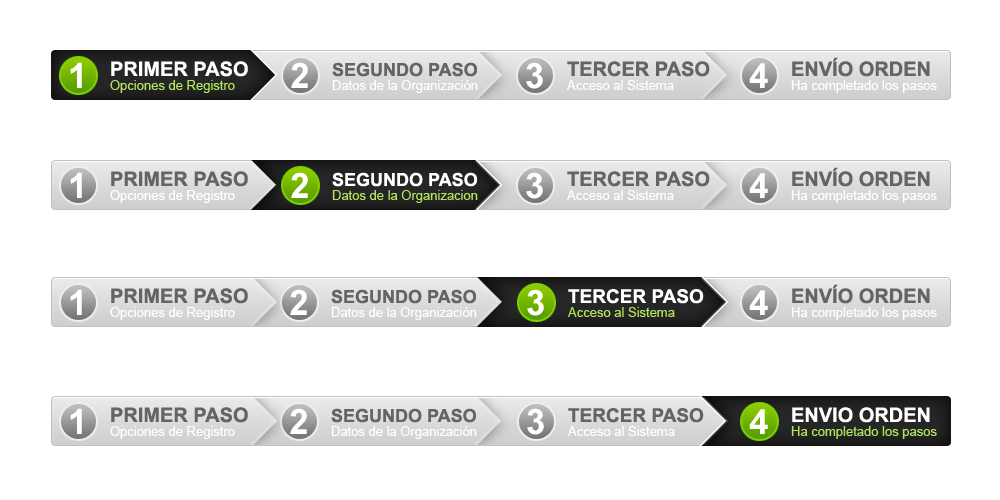
<style>
.page{position:relative;width:1000px;height:500px;background:#ffffff}
.page>*{position:absolute;margin:0}
.t1{font:35px "Arial-BoldMT";letter-spacing:-0.05em;color:#ffffff}
.t2{font:20px "Arial-BoldMT";color:#ffffff;text-transform:uppercase}
.t3{font:18px "Arial-BoldMT";color:#656464;text-transform:uppercase}
.t4{font:20px "Arial-BoldMT";color:#656464;text-transform:uppercase}
.t5{font:13px "ArialMT";color:#b1e35d}
.t6{font:13px "ArialMT";color:#ffffff}
.t7{font:18px "Arial-BoldMT";color:#ffffff;text-transform:uppercase}
.t8{font:19px "Arial-BoldMT";color:#ffffff;text-transform:uppercase}
.t9{font:19px "Arial-BoldMT";color:#656464;text-transform:uppercase}
</style>
<div class="page">
<p class="t1" style="left:70px;top:62px;width:12px;height:26px">1</p>
<p class="t2" style="left:111px;top:61px;width:137px;height:16px">PRIMER PASO</p>
<p class="t1" style="left:291px;top:62px;width:17px;height:26px">2</p>
<p class="t3" style="left:332px;top:62px;width:145px;height:15px">SEGUNDO PASO</p>
<p class="t1" style="left:526px;top:62px;width:17px;height:27px">3</p>
<p class="t4" style="left:567px;top:61px;width:143px;height:16px">TERCER PASO</p>
<p class="t1" style="left:749px;top:63px;width:19px;height:25px">4</p>
<p class="t4" style="left:792px;top:57px;width:138px;height:20px">ENVÍO ORDEN</p>
<p class="t5" style="left:110px;top:80px;width:125px;height:13px">Opciones de Registro</p>
<p class="t6" style="left:332px;top:80px;width:146px;height:13px">Datos de la Organización</p>
<p class="t6" style="left:567px;top:80px;width:107px;height:10px">Acceso al Sistema</p>
<p class="t6" style="left:791px;top:80px;width:146px;height:13px">Ha completado los pasos</p>
<p class="t1" style="left:70px;top:172px;width:12px;height:26px">1</p>
<p class="t4" style="left:111px;top:171px;width:137px;height:16px">PRIMER PASO</p>
<p class="t1" style="left:291px;top:172px;width:17px;height:26px">2</p>
<p class="t7" style="left:332px;top:172px;width:145px;height:15px">SEGUNDO PASO</p>
<p class="t1" style="left:526px;top:172px;width:17px;height:27px">3</p>
<p class="t4" style="left:567px;top:171px;width:143px;height:16px">TERCER PASO</p>
<p class="t1" style="left:749px;top:173px;width:19px;height:25px">4</p>
<p class="t4" style="left:792px;top:167px;width:138px;height:20px">ENVÍO ORDEN</p>
<p class="t6" style="left:110px;top:190px;width:125px;height:13px">Opciones de Registro</p>
<p class="t5" style="left:332px;top:190px;width:146px;height:13px">Datos de la Organizacion</p>
<p class="t6" style="left:567px;top:190px;width:107px;height:10px">Acceso al Sistema</p>
<p class="t6" style="left:791px;top:190px;width:146px;height:13px">Ha completado los pasos</p>
<p class="t1" style="left:70px;top:289px;width:12px;height:26px">1</p>
<p class="t4" style="left:111px;top:288px;width:137px;height:16px">PRIMER PASO</p>
<p class="t1" style="left:290px;top:289px;width:17px;height:26px">2</p>
<p class="t3" style="left:331px;top:289px;width:145px;height:15px">SEGUNDO PASO</p>
<p class="t1" style="left:527px;top:289px;width:17px;height:27px">3</p>
<p class="t8" style="left:568px;top:289px;width:136px;height:15px">TERCER PASO</p>
<p class="t1" style="left:749px;top:290px;width:19px;height:25px">4</p>
<p class="t4" style="left:792px;top:284px;width:138px;height:20px">ENVÍO ORDEN</p>
<p class="t6" style="left:110px;top:307px;width:125px;height:13px">Opciones de Registro</p>
<p class="t6" style="left:331px;top:307px;width:146px;height:13px">Datos de la Organización</p>
<p class="t5" style="left:568px;top:307px;width:107px;height:10px">Acceso al Sistema</p>
<p class="t6" style="left:791px;top:307px;width:146px;height:13px">Ha completado los pasos</p>
<p class="t1" style="left:70px;top:408px;width:12px;height:26px">1</p>
<p class="t4" style="left:111px;top:407px;width:137px;height:16px">PRIMER PASO</p>
<p class="t1" style="left:290px;top:408px;width:17px;height:26px">2</p>
<p class="t3" style="left:331px;top:408px;width:145px;height:15px">segundo paso</p>
<p class="t1" style="left:527px;top:408px;width:17px;height:27px">3</p>
<p class="t9" style="left:568px;top:408px;width:136px;height:15px">tercer paso</p>
<p class="t1" style="left:749px;top:409px;width:19px;height:25px">4</p>
<p class="t2" style="left:792px;top:407px;width:138px;height:16px">ENVIO ORDEN</p>
<p class="t6" style="left:110px;top:426px;width:125px;height:13px">Opciones de Registro</p>
<p class="t6" style="left:331px;top:426px;width:146px;height:13px">Datos de la Organización</p>
<p class="t6" style="left:568px;top:426px;width:107px;height:10px">Acceso al Sistema</p>
<p class="t5" style="left:791px;top:426px;width:146px;height:13px">Ha completado los pasos</p>
</div>
